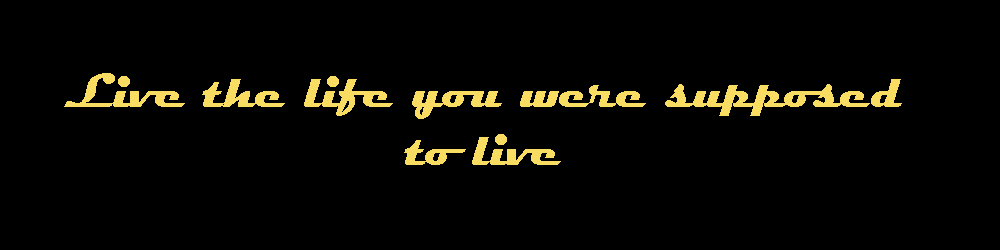
<style>
.page{position:relative;width:1000px;height:250px;background:#000000}
.page>*{position:absolute;margin:0}
.t1{font:48px "Magneto-Bold";color:#f9dc62}
</style>
<div class="page">
<p class="t1" style="left:64px;top:73px;width:838px;height:92px;text-align:center">Live the life you were supposed to live</p>
</div>
